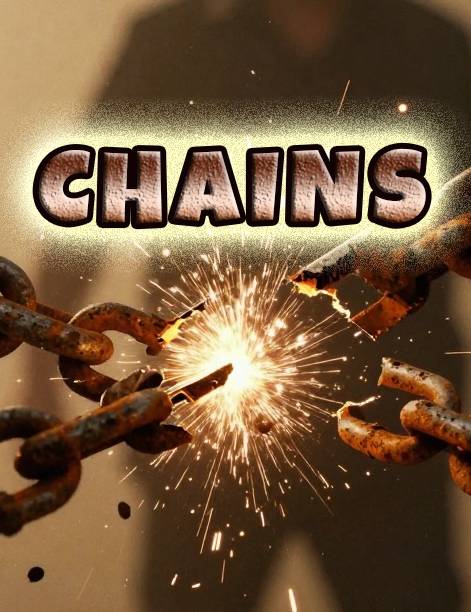
<style>
.page{position:relative;width:471px;height:612px}
.page>*{position:absolute;margin:0}
.t1{font:173.4px "LuckiestGuy-Regular";letter-spacing:0.075em;font-weight:bold}
</style>
<div class="page">
<p class="t1" style="left:38px;top:148px;width:388px;height:76px">CHAINS</p>
</div>
